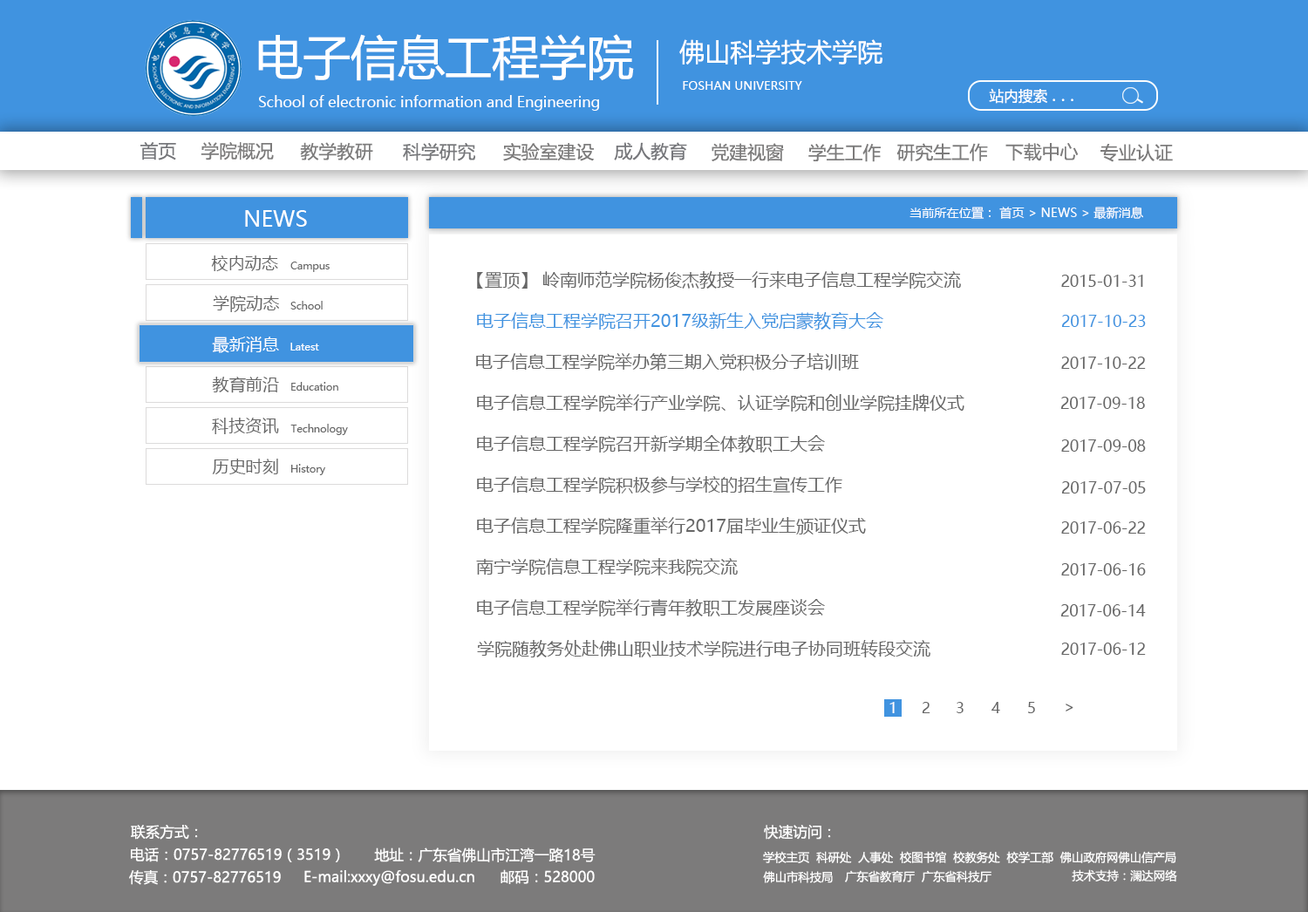
<style>
.page{position:relative;width:1308px;height:912px;background:#ffffff}
.page>*{position:absolute;margin:0}
.t1{font:47.2px "MicrosoftYaHei";color:#ffffff}
.t2{font:25.4px "MicrosoftYaHei";color:#ffffff}
.t3{font:11.6px "MicrosoftYaHei";color:#ffffff}
.t4{font:14.5px "MicrosoftYaHei";color:#ffffff}
.t5{font:18.2px "SimSun";color:#ffffff}
.t6{font:14.5px "MicrosoftYaHei";color:#fefefe}
.t7{font:18.2px "MicrosoftYaHei";color:#76777b}
.t8{font:18.2px "MicrosoftYaHei";color:#7c7b7b}
.t9{font:18.2px "MicrosoftYaHei";color:#77787b}
.t10{font:12.4px "MicrosoftYaHei";color:#ffffff}
.t11{font:21.8px "MicrosoftYaHei";color:#ffffff}
.t12{font:16.7px "MicrosoftYaHei";color:#666666}
.t13{font:10.2px "MicrosoftYaHei";color:#666666}
.t14{font:17.4px "MicrosoftYaHei";color:#666666}
.t15{font:15.3px "MicrosoftYaHei";color:#666666}
.t16{font:17.4px "MicrosoftYaHei";color:#4093e0}
.t17{font:15.3px "MicrosoftYaHei";color:#4093e0}
.t18{font:16.7px "MicrosoftYaHei";color:#ffffff}
.t19{font:10.2px "MicrosoftYaHei";color:#ffffff}
.t20{font:14.5px "MicrosoftYaHei";color:#666666}
</style>
<div class="page">
<p class="t1" style="left:258px;top:34px;width:376px;height:47px">电子信息工程学院</p>
<p class="t2" style="left:679px;top:39px;width:203px;height:26px">佛山科学技术学院</p>
<p class="t3" style="left:683px;top:81px;width:119px;height:9px">FOSHAN UNIVERSITY</p>
<p class="t4" style="left:989px;top:88px;width:84px;height:16px">站内搜索 <span class="t5">...</span></p>
<p class="t6" style="left:259px;top:95px;width:340px;height:16px">School of electronic information and Engineering</p>
<p class="t7" style="left:140px;top:142px;width:36px;height:18px">首页</p>
<p class="t8" style="left:201px;top:142px;width:73px;height:18px">学院概况</p>
<p class="t8" style="left:300px;top:142px;width:73px;height:18px">教学教研</p>
<p class="t9" style="left:403px;top:143px;width:72px;height:18px">科学研究</p>
<p class="t8" style="left:503px;top:142px;width:91px;height:19px">实验室建设</p>
<p class="t7" style="left:614px;top:142px;width:73px;height:18px">成人教育</p>
<p class="t8" style="left:711px;top:143px;width:73px;height:18px">党建视窗</p>
<p class="t8" style="left:808px;top:144px;width:72px;height:18px">学生工作</p>
<p class="t8" style="left:896px;top:143px;width:92px;height:18px">研究生工作</p>
<p class="t8" style="left:1005px;top:143px;width:73px;height:18px">下载中心</p>
<p class="t8" style="left:1100px;top:144px;width:73px;height:18px">专业认证</p>
<p class="t10" style="left:909px;top:207px;width:234px;height:13px">当前所在位置： 首页 &gt; NEWS &gt; 最新消息</p>
<p class="t11" style="left:245px;top:210px;width:62px;height:17px">NEWS</p>
<p class="t12" style="left:211px;top:255px;width:67px;height:16px">校内动态</p>
<p class="t13" style="left:290px;top:262px;width:40px;height:10px">Campus</p>
<p class="t14" style="left:477px;top:271px;width:484px;height:18px">【置顶】 岭南师范学院杨俊杰教授一行来电子信息工程学院交流</p>
<p class="t15" style="left:1061px;top:275px;width:82px;height:12px">2015-01-31</p>
<p class="t12" style="left:213px;top:296px;width:66px;height:16px">学院动态</p>
<p class="t13" style="left:290px;top:301px;width:33px;height:8px">School</p>
<p class="t16" style="left:477px;top:312px;width:406px;height:18px">电子信息工程学院召开2017级新生入党启蒙教育大会</p>
<p class="t17" style="left:1061px;top:315px;width:85px;height:12px">2017-10-23</p>
<p class="t18" style="left:212px;top:337px;width:67px;height:16px">最新消息</p>
<p class="t19" style="left:290px;top:343px;width:29px;height:7px">Latest</p>
<p class="t14" style="left:476px;top:353px;width:383px;height:18px">电子信息工程学院举办第三期入党积极分子培训班</p>
<p class="t15" style="left:1061px;top:357px;width:85px;height:12px">2017-10-22</p>
<p class="t12" style="left:212px;top:377px;width:67px;height:16px">教育前沿</p>
<p class="t13" style="left:291px;top:382px;width:47px;height:9px">Education</p>
<p class="t14" style="left:477px;top:394px;width:487px;height:17px">电子信息工程学院举行产业学院、认证学院和创业学院挂牌仪式</p>
<p class="t15" style="left:1060px;top:397px;width:85px;height:12px">2017-09-18</p>
<p class="t12" style="left:212px;top:418px;width:67px;height:16px">科技资讯</p>
<p class="t13" style="left:290px;top:424px;width:58px;height:11px">Technology</p>
<p class="t14" style="left:477px;top:435px;width:348px;height:17px">电子信息工程学院召开新学期全体教职工大会</p>
<p class="t15" style="left:1061px;top:439px;width:85px;height:13px">2017-09-08</p>
<p class="t12" style="left:212px;top:459px;width:66px;height:15px">历史时刻</p>
<p class="t13" style="left:291px;top:464px;width:34px;height:11px">History</p>
<p class="t14" style="left:477px;top:476px;width:365px;height:17px">电子信息工程学院积极参与学校的招生宣传工作</p>
<p class="t15" style="left:1061px;top:481px;width:85px;height:12px">2017-07-05</p>
<p class="t14" style="left:477px;top:517px;width:389px;height:17px">电子信息工程学院隆重举行2017届毕业生颁证仪式</p>
<p class="t15" style="left:1061px;top:521px;width:85px;height:13px">2017-06-22</p>
<p class="t14" style="left:476px;top:558px;width:262px;height:17px">南宁学院信息工程学院来我院交流</p>
<p class="t15" style="left:1061px;top:563px;width:85px;height:12px">2017-06-16</p>
<p class="t14" style="left:477px;top:599px;width:348px;height:17px">电子信息工程学院举行青年教职工发展座谈会</p>
<p class="t15" style="left:1060px;top:604px;width:86px;height:12px">2017-06-14</p>
<p class="t14" style="left:477px;top:640px;width:453px;height:17px">学院随教务处赴佛山职业技术学院进行电子协同班转段交流</p>
<p class="t15" style="left:1061px;top:642px;width:85px;height:13px">2017-06-12</p>
<p class="t4" style="left:889px;top:702px;width:5px;height:11px">1</p>
<p class="t20" style="left:921px;top:702px;width:9px;height:11px">2</p>
<p class="t20" style="left:956px;top:702px;width:7px;height:11px">3</p>
<p class="t20" style="left:991px;top:702px;width:9px;height:11px">4</p>
<p class="t20" style="left:1028px;top:702px;width:7px;height:11px">5</p>
<p class="t20" style="left:1065px;top:704px;width:8px;height:7px">&gt;</p>
<p class="t4" style="left:131px;top:825px;width:67px;height:15px">联系方式：</p>
<p class="t4" style="left:764px;top:825px;width:67px;height:15px">快速访问：</p>
<p class="t4" style="left:131px;top:847px;width:209px;height:15px">电话：0757-82776519（3519）</p>
<p class="t4" style="left:374px;top:847px;width:221px;height:15px">地址：广东省佛山市江湾一路18号</p>
<p class="t3" style="left:763px;top:851px;width:413px;height:12px">学校主页  科研处  人事处  校图书馆  校教务处  校学工部  佛山政府网佛山信产局</p>
<p class="t4" style="left:500px;top:869px;width:95px;height:15px">邮码：528000</p>
<p class="t3" style="left:1071px;top:869px;width:106px;height:12px">技术支持：澜达网络</p>
<p class="t4" style="left:129px;top:870px;width:152px;height:15px">传真：0757-82776519</p>
<p class="t4" style="left:304px;top:870px;width:170px;height:16px">E-mail:xxxy@fosu.edu.cn</p>
<p class="t3" style="left:763px;top:871px;width:70px;height:12px">佛山市科技局</p>
<p class="t3" style="left:845px;top:870px;width:146px;height:12px">广东省教育厅  广东省科技厅</p>
</div>
